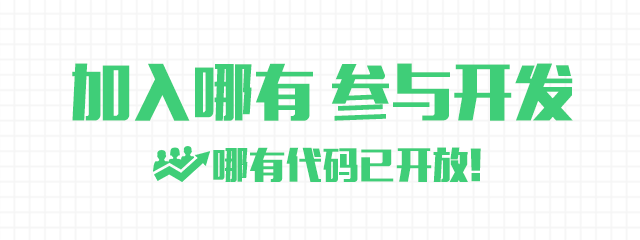
<style>
.page{position:relative;width:640px;height:240px;background:#ffffff}
.page>*{position:absolute;margin:0}
.t1{font:60px "MFLiHei_Noncommercial-Regular";letter-spacing:0.02em;color:#3fce78}
.t2{font:36px "MFLiHei_Noncommercial-Regular";letter-spacing:0.02em;color:#3fce78}
</style>
<div class="page">
<p class="t1" style="left:72px;top:63px;width:501px;height:58px">加入哪有 参与开发</p>
<p class="t2" style="left:213px;top:147px;width:268px;height:35px">哪有代码已开放!</p>
</div>
